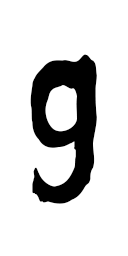
<style>
.page{position:relative;width:128px;height:256px;background:#ffffff}
.page>*{position:absolute;margin:0}
.t1{font:250px "AB-fudeshichi";letter-spacing:0.42em;color:#000000;scale:0.7 1}
</style>
<div class="page">
<p class="t1" style="left:30px;top:54px;width:67px;height:150px">g</p>
</div>
